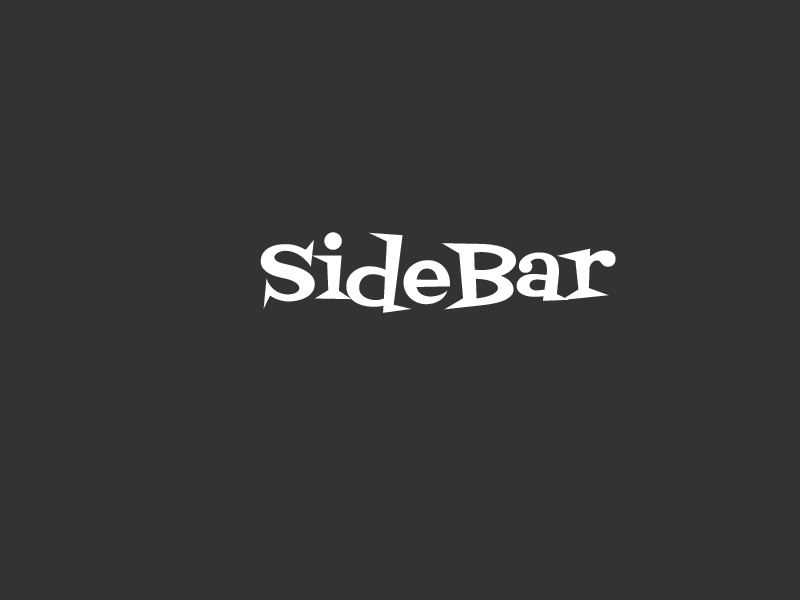
<style>
.page{position:relative;width:800px;height:600px;background:#333333}
.page>*{position:absolute;margin:0}
.t1{font:84px "FontdinerSwanky";color:#ffffff}
</style>
<div class="page">
<p class="t1" style="left:260px;top:232px;width:356px;height:81px">SideBar</p>
</div>
